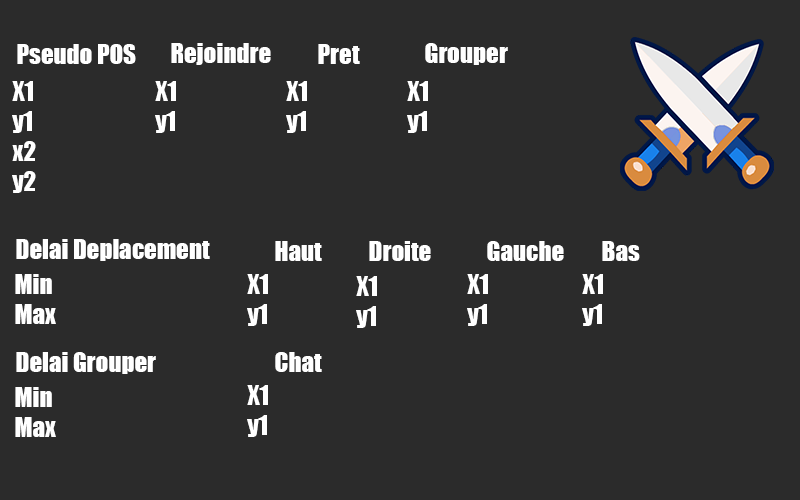
<style>
.page{position:relative;width:800px;height:500px;background:#2b2b2b}
.page>*{position:absolute;margin:0}
.t1{font:25px "Impact";color:#ffffff}
</style>
<div class="page">
<p class="t1" style="left:17px;top:44px;width:119px;height:20px">Pseudo POS</p>
<p class="t1" style="left:171px;top:43px;width:100px;height:22px">Rejoindre</p>
<p class="t1" style="left:318px;top:44px;width:42px;height:20px">Pret</p>
<p class="t1" style="left:425px;top:43px;width:83px;height:22px">Grouper</p>
<p class="t1" style="left:12px;top:81px;width:24px;height:112px">X1 <br>y1<br>x2<br>y2</p>
<p class="t1" style="left:155px;top:81px;width:21px;height:52px">X1 <br>y1</p>
<p class="t1" style="left:286px;top:81px;width:21px;height:52px">X1 <br>y1</p>
<p class="t1" style="left:407px;top:81px;width:21px;height:52px">X1 <br>y1</p>
<p class="t1" style="left:16px;top:239px;width:194px;height:22px">Delai Deplacement</p>
<p class="t1" style="left:275px;top:241px;width:47px;height:20px">Haut</p>
<p class="t1" style="left:369px;top:241px;width:62px;height:20px">Droite</p>
<p class="t1" style="left:487px;top:241px;width:77px;height:20px">Gauche</p>
<p class="t1" style="left:602px;top:241px;width:38px;height:20px">Bas</p>
<p class="t1" style="left:15px;top:274px;width:41px;height:50px">Min<br>Max</p>
<p class="t1" style="left:247px;top:274px;width:21px;height:52px">X1 <br>y1</p>
<p class="t1" style="left:356px;top:276px;width:21px;height:52px">X1 <br>y1</p>
<p class="t1" style="left:467px;top:274px;width:21px;height:52px">X1 <br>y1</p>
<p class="t1" style="left:582px;top:274px;width:21px;height:52px">X1 <br>y1</p>
<p class="t1" style="left:16px;top:352px;width:140px;height:22px">Delai Grouper</p>
<p class="t1" style="left:275px;top:352px;width:47px;height:20px">Chat</p>
<p class="t1" style="left:15px;top:387px;width:41px;height:50px">Min<br>Max</p>
<p class="t1" style="left:247px;top:385px;width:21px;height:52px">X1 <br>y1</p>
</div>
